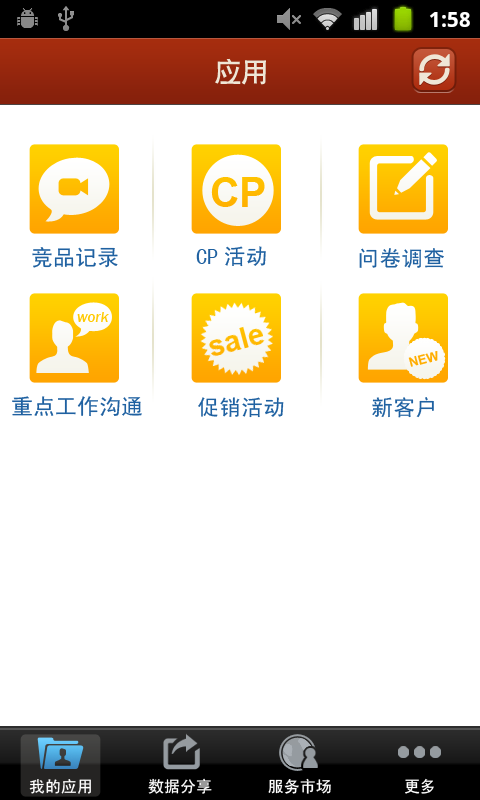
<style>
.page{position:relative;width:480px;height:800px;background:#ffffff}
.page>*{position:absolute;margin:0}
.t1{font:27px "CTCuHeiSJ";color:#efe6d6}
.t2{font:22px "SimHei";color:#1f61a1}
.t3{font:15px "FranklinGothic-MediumItalic";color:#ffc900}
.t4{font:13px "Arial-BoldMT";color:#ffad00}
.t5{font:16px "SimHei";color:#ffffff}
</style>
<div class="page">
<p class="t1" style="left:215px;top:58px;width:51px;height:27px">应用</p>
<p class="t1" style="left:215px;top:58px;width:51px;height:27px">应用</p>
<p class="t2" style="left:196px;top:246px;width:70px;height:21px">CP活动</p>
<p class="t2" style="left:32px;top:247px;width:86px;height:21px">竞品记录</p>
<p class="t2" style="left:359px;top:248px;width:85px;height:20px">问卷调查</p>
<p class="t3" style="left:77px;top:312px;width:32px;height:10px">work</p>
<p class="t4" style="left:408px;top:351px;width:30px;height:16px;rotate:-15deg">NEW</p>
<p class="t2" style="left:12px;top:396px;width:130px;height:21px">重点工作沟通</p>
<p class="t2" style="left:198px;top:397px;width:86px;height:21px">促销活动</p>
<p class="t2" style="left:372px;top:397px;width:62px;height:21px">新客户</p>
<p class="t5" style="left:29px;top:779px;width:62px;height:15px">我的应用</p>
<p class="t5" style="left:148px;top:778px;width:64px;height:16px">数据分享</p>
<p class="t5" style="left:268px;top:778px;width:63px;height:16px">服务市场</p>
<p class="t5" style="left:405px;top:778px;width:29px;height:16px">更多</p>
</div>
